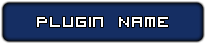
<style>
.page{position:relative;width:206px;height:44px;background:#152e63}
.page>*{position:absolute;margin:0}
.t1{font:27px "VisitorTT2BRK";color:#ffffff}
</style>
<div class="page">
<p class="t1" style="left:37px;top:17px;width:131px;height:10px">Plugin Name</p>
</div>
